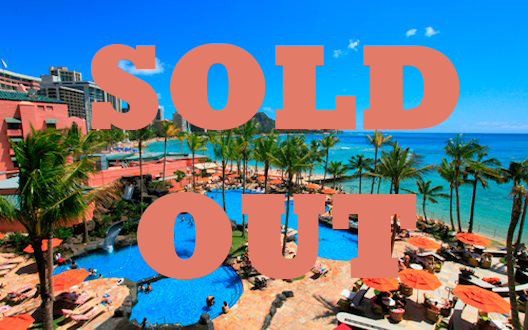
<style>
.page{position:relative;width:528px;height:330px}
.page>*{position:absolute;margin:0}
.t1{font:124px "Rockwell-ExtraBold";color:#e27b68}
</style>
<div class="page">
<p class="t1" style="left:90px;top:43px;width:370px;height:236px;text-align:center">SOLD<br>OUT</p>
</div>
